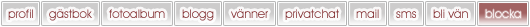
<style>
.page{position:relative;width:530px;height:27px}
.page>*{position:absolute;margin:0}
.t1{font:12px "AvantGardeITCbyBT-Book";color:#822d2f}
.t2{font:12px "AvantGardeITCbyBT-Book"}
.t3{font:12px "AvantGardeITCbyBT-Book";color:#ffffff}
</style>
<div class="page">
<p class="t1" style="left:8px;top:9px;width:25px;height:11px">profil</p>
<p class="t1" style="left:49px;top:9px;width:43px;height:12px">gästbok</p>
<p class="t2" style="left:109px;top:9px;width:56px;height:9px">fotoalbum</p>
<p class="t1" style="left:182px;top:9px;width:32px;height:12px">blogg</p>
<p class="t1" style="left:231px;top:9px;width:37px;height:9px">vänner</p>
<p class="t1" style="left:285px;top:9px;width:54px;height:11px">privatchat</p>
<p class="t1" style="left:356px;top:9px;width:23px;height:9px">mail</p>
<p class="t2" style="left:396px;top:11px;width:20px;height:7px">sms</p>
<p class="t1" style="left:433px;top:9px;width:35px;height:9px">bli vän</p>
<p class="t3" style="left:485px;top:9px;width:36px;height:9px">blocka</p>
</div>
